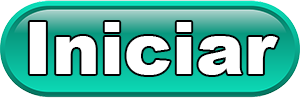
<style>
.page{position:relative;width:300px;height:98px;background:#ffffff}
.page>*{position:absolute;margin:0}
.t1{font:72px "Arial-Black";color:#ffffff}
</style>
<div class="page">
<p class="t1" style="left:29px;top:22px;width:249px;height:53px">Iniciar</p>
</div>
